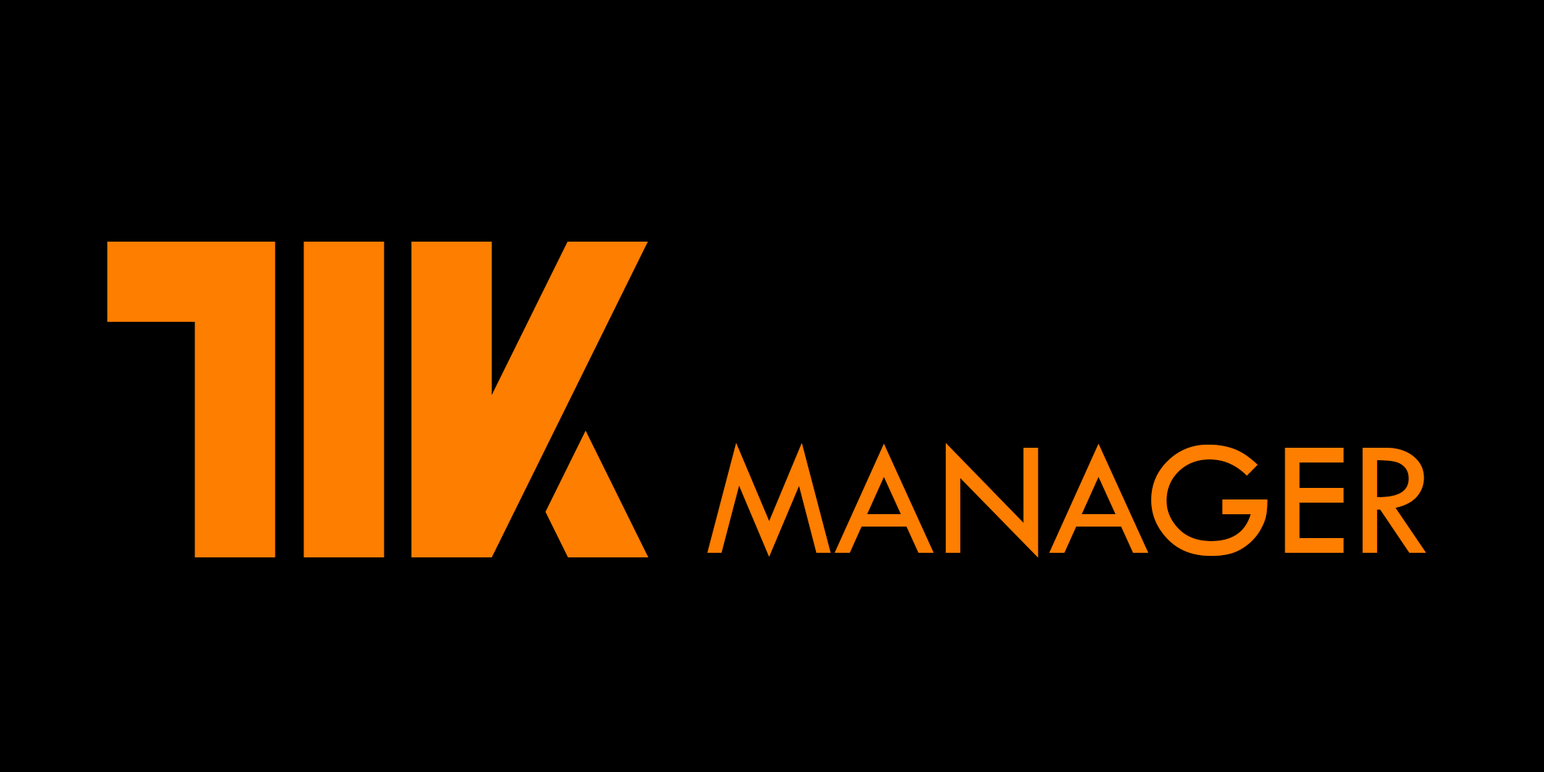
<style>
.page{position:relative;width:1544px;height:772px;background:#000000}
.page>*{position:absolute;margin:0}
.t1{font:168.8px "TwCenMT-Regular";color:#fe7e00}
</style>
<div class="page">
<p class="t1" style="left:707px;top:443px;width:720px;height:114px">MANAGER</p>
</div>
